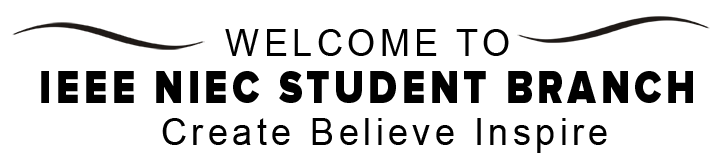
<style>
.page{position:relative;width:716px;height:165px;background:#ffffff}
.page>*{position:absolute;margin:0}
.t1{font:38.2px "ArialMT";letter-spacing:0.12em;color:#000000;scale:0.95 1}
.t2{font:46.7px "ProximaNova-Black";letter-spacing:0.12em;color:#000000;scale:0.83 1}
</style>
<div class="page">
<p class="t1" style="left:225px;top:29px;width:284px;height:27px">WELCOME TO</p>
<p class="t2" style="left:41px;top:71px;width:652px;height:32px">IEEE NIEC STUDENT BRANCH</p>
<p class="t1" style="left:162px;top:118px;width:445px;height:35px">Create Believe Inspire</p>
</div>
